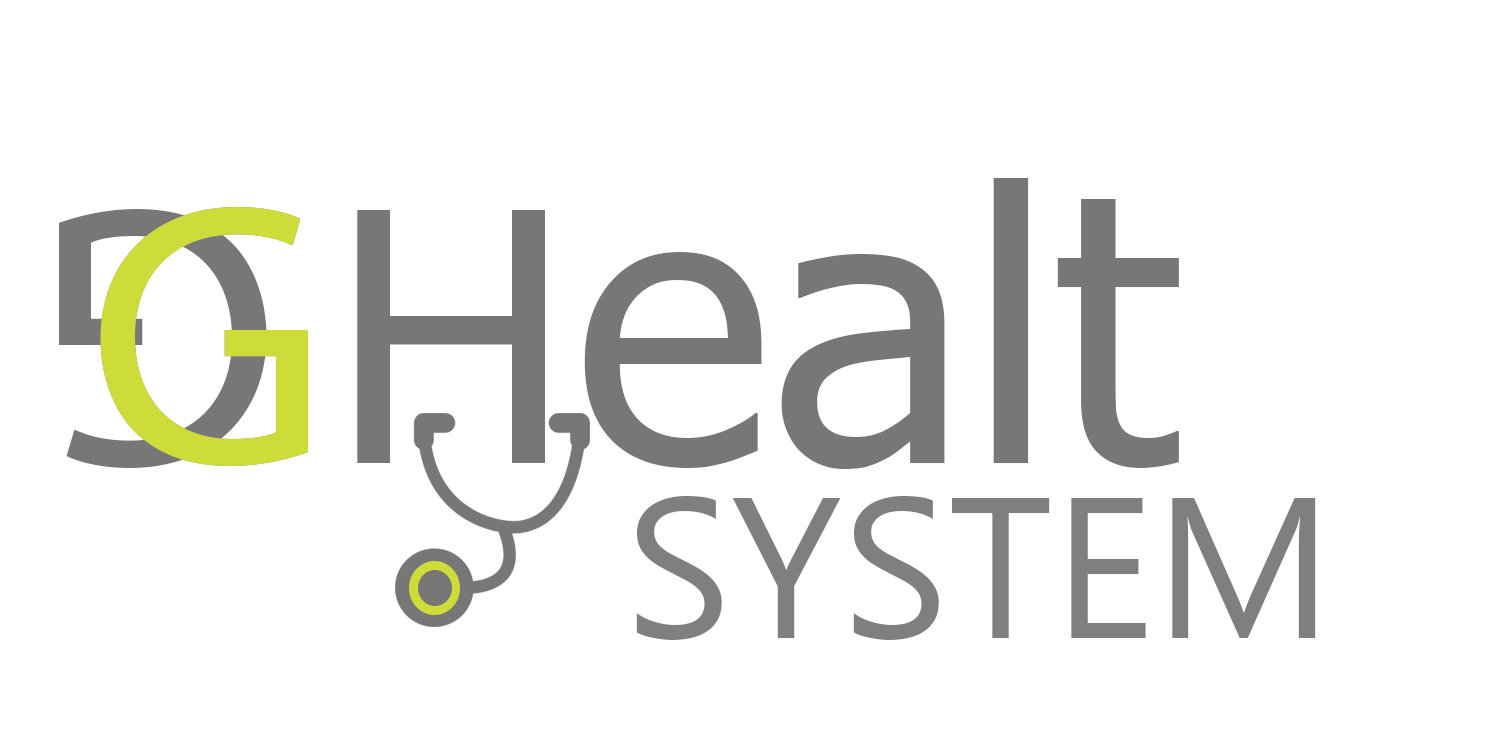
<style>
.page{position:relative;width:1500px;height:732px;background:#ffffff}
.page>*{position:absolute;margin:0}
.t1{font:375px "Tahoma";color:#777777}
.t2{font:375px "MyriadPro-Regular";color:#777777}
.t3{font:375.3px "MyriadPro-Regular";color:#777777}
.t4{font:375px "MyriadPro-Regular";color:#cddc39}
.t5{font:200px "SegoeUI";color:#777777}
</style>
<div class="page">
<p class="t1" style="left:100px;top:178px;width:1079px;height:291px"><span class="t2">GH</span>ealth</p>
<p class="t3" style="left:59px;top:209px;width:208px;height:260px;rotate:180deg">G</p>
<p class="t4" style="left:100px;top:206px;width:208px;height:260px">G</p>
<p class="t5" style="left:636px;top:496px;width:680px;height:144px">SYSTEM</p>
</div>
